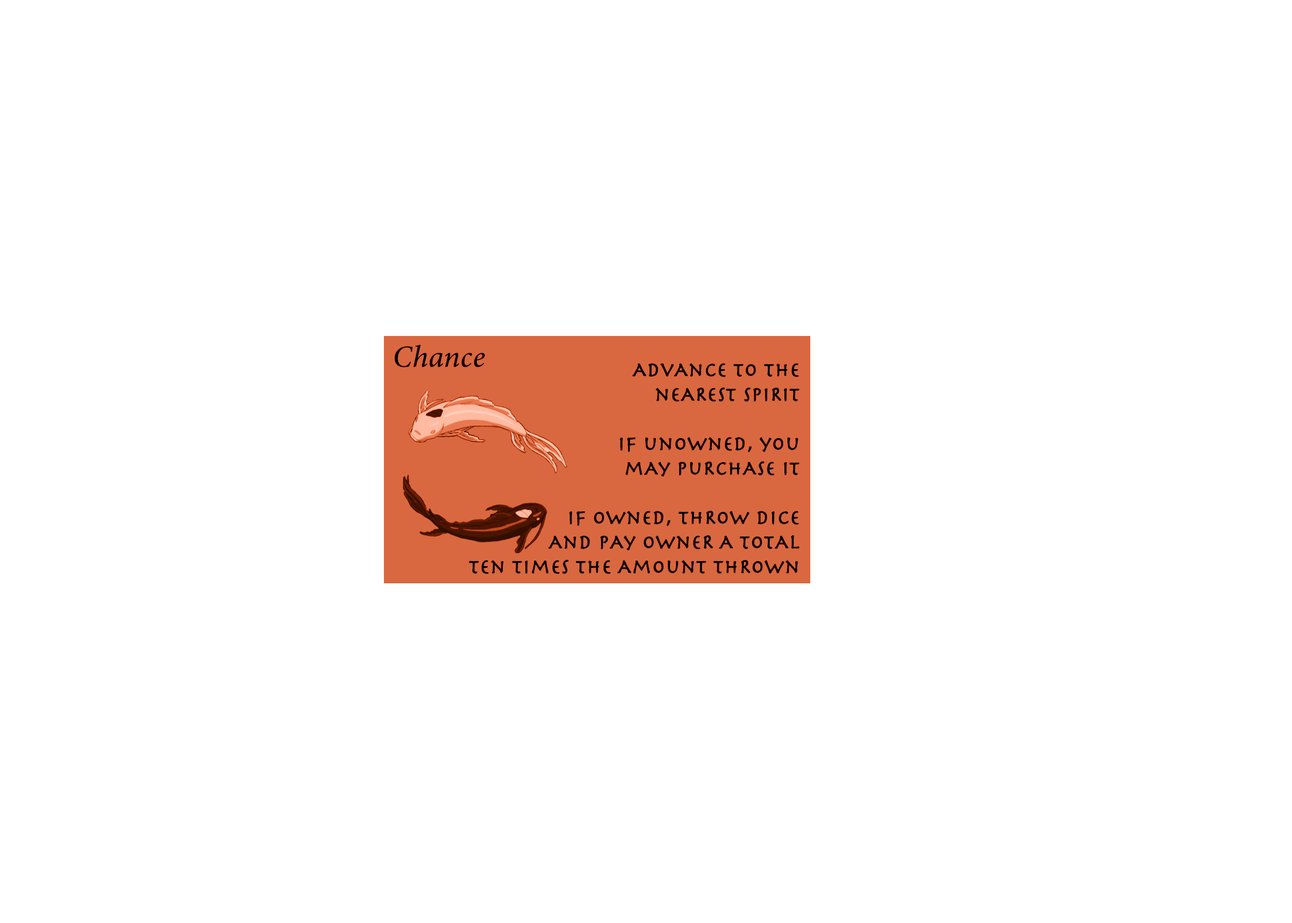
<style>
.page{position:relative;width:1292px;height:923px;background:#ffffff}
.page>*{position:absolute;margin:0}
.t1{font:30.8px "MinionConceptItalic-MediumItalic";color:#000000;font-weight:bold}
.t2{font:20.5px "Herculanum";color:#000000;font-weight:bold}
</style>
<div class="page">
<p class="t1" style="left:394px;top:345px;width:91px;height:22px">Chance</p>
<p class="t2" style="left:469px;top:363px;width:331px;height:211px;text-align:right">AdvAnce to thE<br> neARest spiRit<br><br>if unowned, you<br>mAy puRchAse it<br><br>if owned, thRow dice<br>AnD pAy owneR A totAl<br>ten times the Amount thRown</p>
</div>
